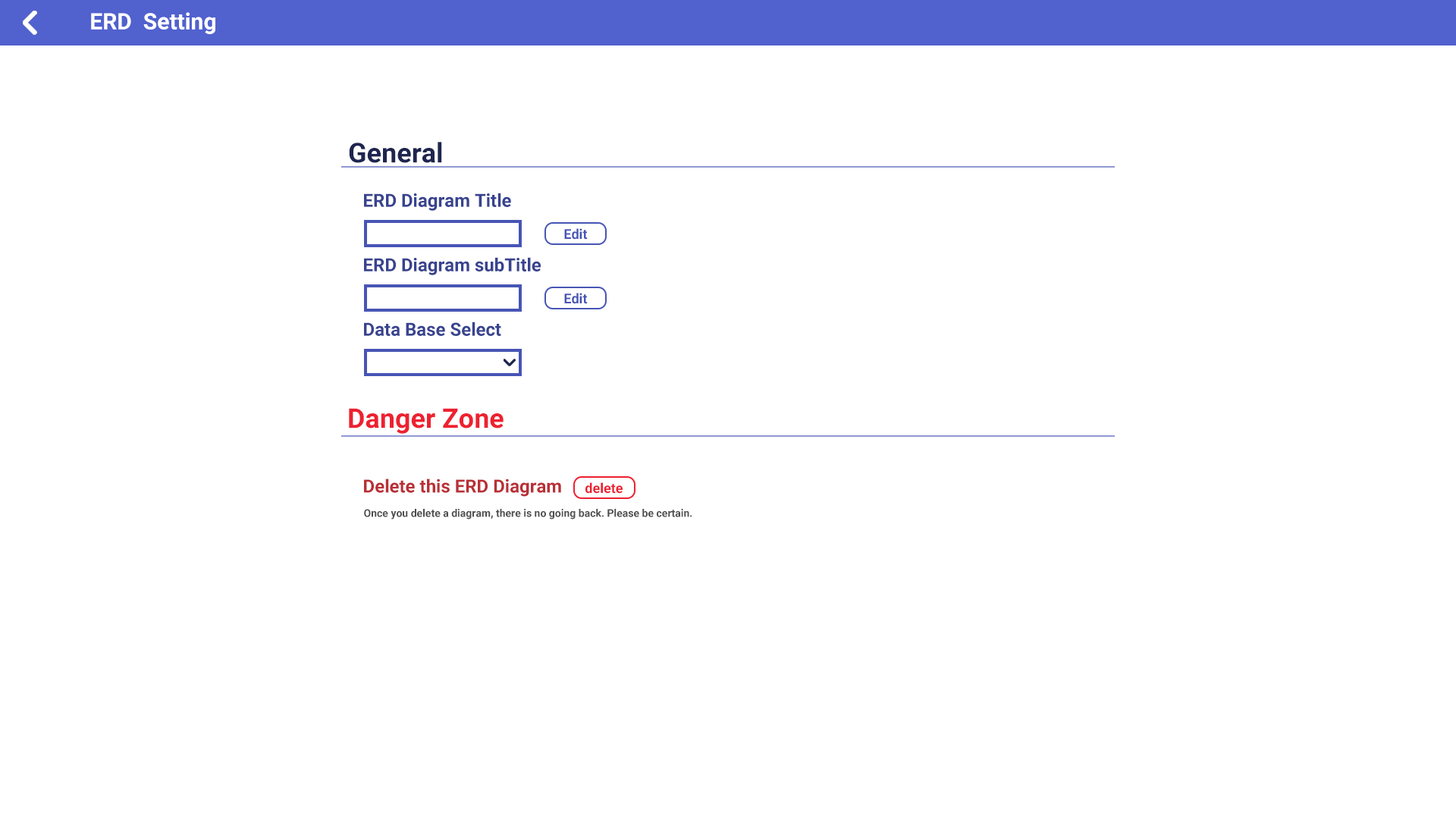
<style>
.page{position:relative;width:1456px;height:819px;background:#ffffff}
.page>*{position:absolute;margin:0}
.t1{font:22.7px "Roboto-Bold";color:#ffffff}
.t2{font:27.3px "Roboto-Bold";color:#1f254f}
.t3{font:18.2px "Roboto-Bold";color:#38438f}
.t4{font:13.6px "Roboto-Bold";color:#4755b5}
.t5{font:27.3px "Roboto-Bold";color:#ed2130}
.t6{font:18.2px "Roboto-Bold";color:#b92f36}
.t7{font:13.6px "Roboto-Bold";color:#ed2130}
.t8{font:10.6px "Roboto-Bold";color:#4d4d4d}
</style>
<div class="page">
<p class="t1" style="left:91px;top:12px;width:124px;height:22px">ERD  Setting</p>
<p class="t2" style="left:349px;top:142px;width:93px;height:21px">General</p>
<p class="t3" style="left:364px;top:193px;width:147px;height:18px">ERD Diagram Title</p>
<p class="t4" style="left:564px;top:228px;width:24px;height:12px">Edit</p>
<p class="t3" style="left:364px;top:257px;width:177px;height:18px">ERD Diagram subTitle</p>
<p class="t4" style="left:564px;top:293px;width:24px;height:11px">Edit</p>
<p class="t3" style="left:364px;top:322px;width:137px;height:14px">Data Base Select</p>
<p class="t5" style="left:349px;top:408px;width:155px;height:26px">Danger Zone</p>
<p class="t6" style="left:364px;top:479px;width:197px;height:18px">Delete this ERD Diagram</p>
<p class="t7" style="left:585px;top:482px;width:38px;height:12px">delete</p>
<p class="t8" style="left:364px;top:509px;width:328px;height:10px">Once you delete a diagram, there is no going back. Please be certain.</p>
</div>
